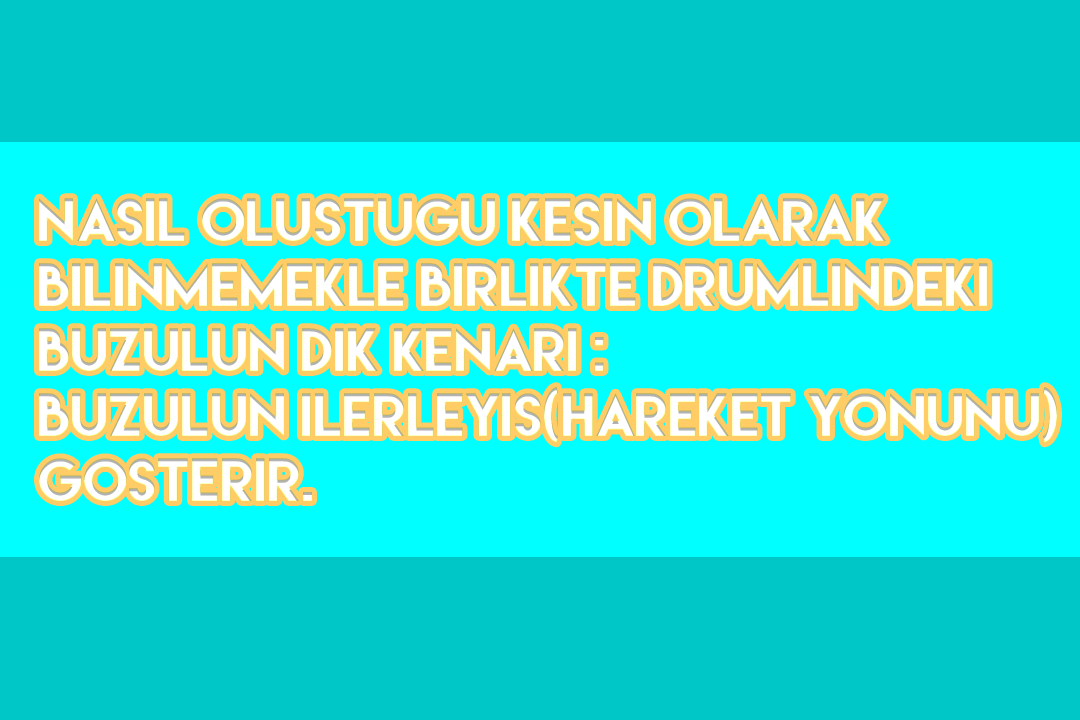
<style>
.page{position:relative;width:1080px;height:720px;background:#00c7c7}
.page>*{position:absolute;margin:0}
.t1{font:54.2px "LemonMilk";color:#ffffff}
</style>
<div class="page">
<p class="t1" style="left:39px;top:198px;width:1018px;height:303px">nasil olustugu kesin olarak <br>bilinmemekle birlikte drumlindeki <br>buzulun dik kenari :<br>buzulun ilerleyis(hareket yonunu)<br>gosterir.</p>
</div>
